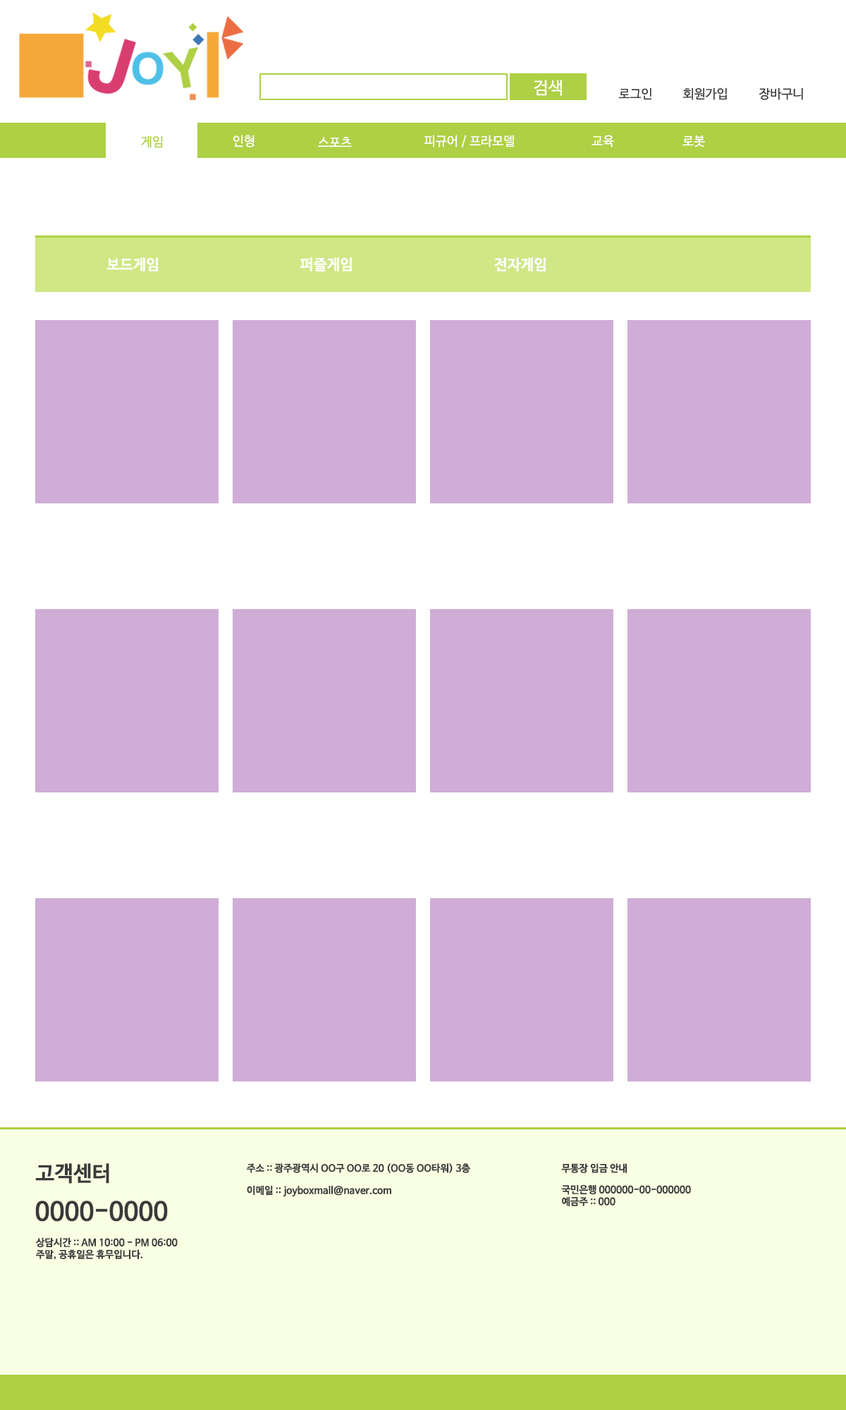
<style>
.page{position:relative;width:846px;height:1410px;background:#ffffff}
.page>*{position:absolute;margin:0}
.t1{font:16.9px "NanumBarunGothic";color:#ffffff}
.t2{font:12.7px "NanumBarunGothic";color:#3a3a3a}
.t3{font:12.7px "NanumBarunGothic";color:#aed044}
.t4{font:12.7px "NanumBarunGothic";color:#ffffff}
.t5{font:14.8px "NanumBarunGothicBold";color:#ffffff}
.t6{font:21.1px "NanumBarunGothicBold";color:#3a3a3a}
.t7{font:9.9px "NanumBarunGothicBold";color:#3a3a3a}
.t8{font:25.4px "NanumBarunGothicBold";color:#3a3a3a}
</style>
<div class="page">
<p class="t1" style="left:534px;top:80px;width:28px;height:16px">검색</p>
<p class="t2" style="left:618px;top:87px;width:33px;height:13px">로그인</p>
<p class="t2" style="left:683px;top:87px;width:44px;height:13px">회원가입</p>
<p class="t2" style="left:758px;top:87px;width:45px;height:13px">장바구니</p>
<p class="t3" style="left:141px;top:135px;width:22px;height:13px">게임</p>
<p class="t4" style="left:233px;top:135px;width:21px;height:12px">인형</p>
<p class="t4" style="left:318px;top:137px;width:34px;height:10px">스포츠</p>
<p class="t4" style="left:424px;top:135px;width:91px;height:12px">피규어 / 프라모델</p>
<p class="t4" style="left:591px;top:135px;width:23px;height:12px">교육</p>
<p class="t4" style="left:682px;top:135px;width:23px;height:12px">로봇</p>
<p class="t5" style="left:106px;top:257px;width:52px;height:14px">보드게임</p>
<p class="t5" style="left:300px;top:257px;width:52px;height:14px">퍼즐게임</p>
<p class="t5" style="left:494px;top:257px;width:52px;height:14px">전자게임</p>
<p class="t6" style="left:35px;top:1163px;width:74px;height:20px">고객센터</p>
<p class="t7" style="left:247px;top:1163px;width:223px;height:10px">주소 :: 광주광역시 OO구 OO로 20 (OO동 OO타워) 3층</p>
<p class="t7" style="left:561px;top:1163px;width:66px;height:10px">무통장 입금 안내</p>
<p class="t7" style="left:247px;top:1185px;width:144px;height:12px">이메일 :: joyboxmall@naver.com</p>
<p class="t7" style="left:561px;top:1184px;width:130px;height:22px">국민은행 000000-00-000000<br>예금주 :: 000</p>
<p class="t8" style="left:35px;top:1200px;width:133px;height:22px">0000-0000</p>
<p class="t7" style="left:35px;top:1237px;width:143px;height:23px">상담시간 :: AM 10:00 - PM 06:00<br>주말, 공휴일은 휴무입니다.</p>
</div>
